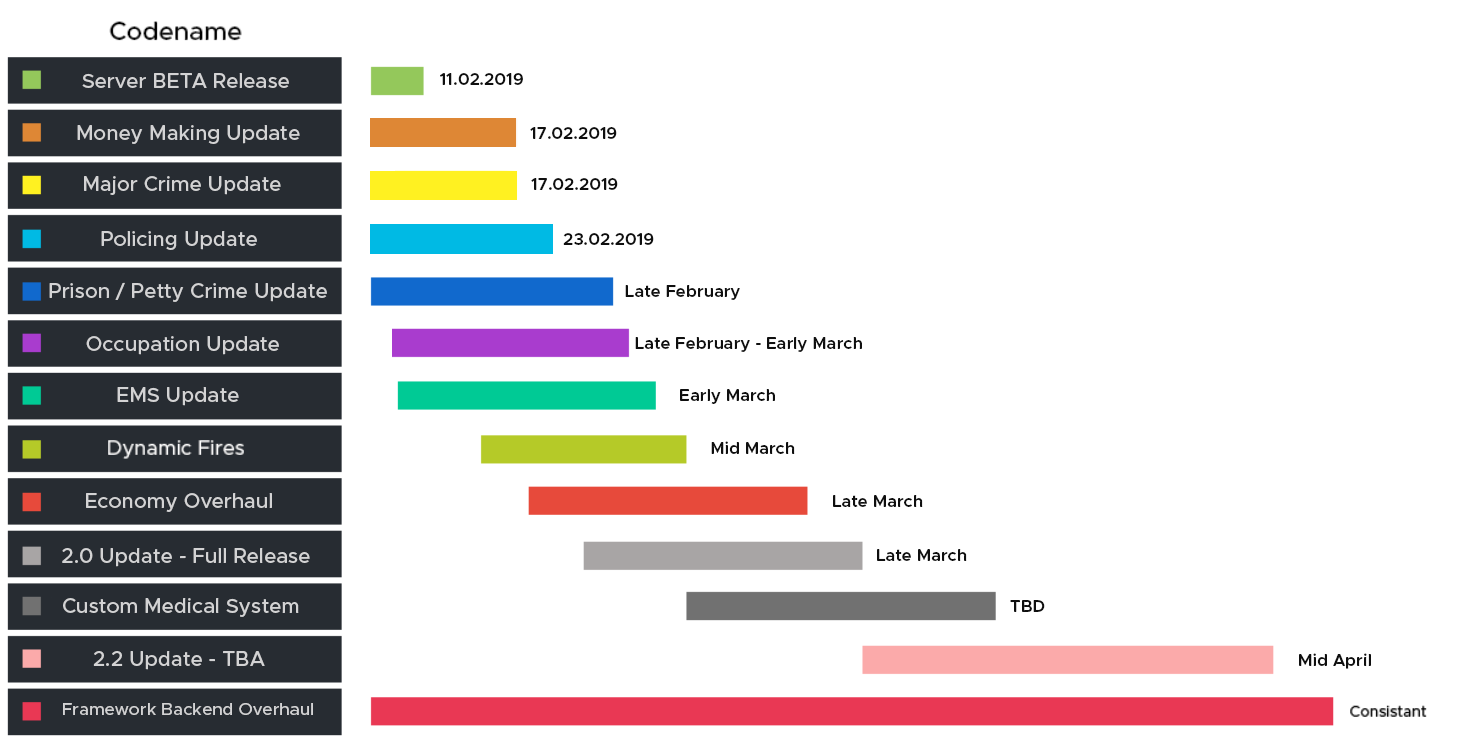
<style>
.page{position:relative;width:1473px;height:741px;background:#ffffff}
.page>*{position:absolute;margin:0}
.t1{font:20.6px "Metropolis-Medium";color:#d3d3d4}
.t2{font:16.8px "Metropolis-SemiBold";color:#0f0f0f}
.t3{font:17.3px "Metropolis-Medium";color:#d3d3d4}
</style>
<div class="page">
<p class="t1" style="left:82px;top:73px;width:207px;height:15px">Server BETA Release</p>
<p class="t2" style="left:440px;top:73px;width:83px;height:12px">11.02.2019</p>
<p class="t1" style="left:77px;top:125px;width:223px;height:19px">Money Making Update</p>
<p class="t2" style="left:530px;top:127px;width:87px;height:12px">17.02.2019</p>
<p class="t1" style="left:84px;top:176px;width:197px;height:19px">Major Crime Update</p>
<p class="t2" style="left:531px;top:178px;width:87px;height:12px">17.02.2019</p>
<p class="t1" style="left:101px;top:231px;width:156px;height:19px">Policing Update</p>
<p class="t2" style="left:563px;top:233px;width:91px;height:12px">23.02.2019</p>
<p class="t1" style="left:49px;top:282px;width:278px;height:20px">Prison / Petty Crime Update</p>
<p class="t2" style="left:625px;top:285px;width:115px;height:15px">Late February</p>
<p class="t1" style="left:86px;top:336px;width:193px;height:19px">Occupation Update</p>
<p class="t2" style="left:635px;top:337px;width:227px;height:15px">Late February - Early March</p>
<p class="t1" style="left:117px;top:387px;width:122px;height:19px">EMS Update</p>
<p class="t2" style="left:680px;top:389px;width:95px;height:15px">Early March</p>
<p class="t2" style="left:711px;top:441px;width:84px;height:13px">Mid March</p>
<p class="t1" style="left:86px;top:493px;width:186px;height:19px">Economy Overhaul</p>
<p class="t2" style="left:833px;top:495px;width:90px;height:12px">Late March</p>
<p class="t1" style="left:62px;top:548px;width:248px;height:19px">2.0 Update - Full Release</p>
<p class="t2" style="left:877px;top:549px;width:90px;height:12px">Late March</p>
<p class="t1" style="left:63px;top:598px;width:236px;height:19px">Custom Medical System</p>
<p class="t2" style="left:1010px;top:600px;width:35px;height:12px">TBD</p>
<p class="t1" style="left:93px;top:651px;width:172px;height:19px">2.2 Update - TBA</p>
<p class="t2" style="left:1299px;top:653px;width:72px;height:16px">Mid April</p>
<p class="t3" style="left:63px;top:703px;width:250px;height:12px">Framework Backend Overhaul</p>
</div>
